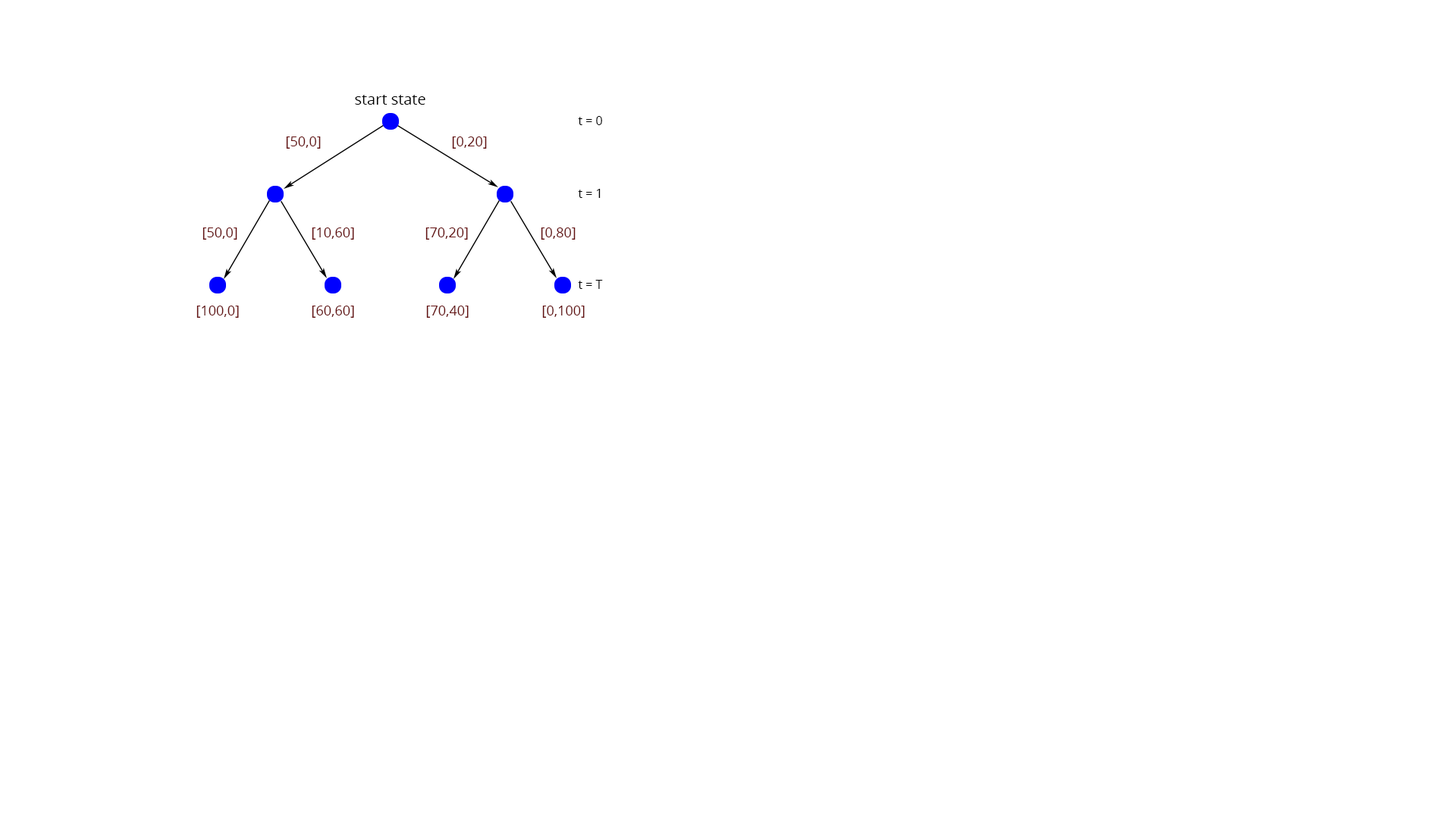
<style>
.page{position:relative;width:1456px;height:819px;background:#ffffff}
.page>*{position:absolute;margin:0}
.t1{font:15.2px "OpenSans";color:#000000}
.t2{font:12.1px "OpenSans";color:#000000}
.t3{font:13.6px "OpenSans";color:#641010}
</style>
<div class="page">
<p class="t1" style="left:355px;top:95px;width:70px;height:10px">start state</p>
<p class="t2" style="left:578px;top:116px;width:24px;height:9px">t = 0</p>
<p class="t3" style="left:286px;top:136px;width:35px;height:13px">[50,0]</p>
<p class="t3" style="left:452px;top:136px;width:35px;height:13px">[0,20]</p>
<p class="t2" style="left:578px;top:189px;width:23px;height:9px">t = 1</p>
<p class="t3" style="left:202px;top:227px;width:35px;height:13px">[50,0]</p>
<p class="t3" style="left:312px;top:227px;width:42px;height:13px">[10,60]</p>
<p class="t3" style="left:425px;top:227px;width:43px;height:13px">[70,20]</p>
<p class="t3" style="left:541px;top:227px;width:35px;height:13px">[0,80]</p>
<p class="t2" style="left:578px;top:280px;width:25px;height:9px">t = T</p>
<p class="t3" style="left:196px;top:306px;width:43px;height:12px">[100,0]</p>
<p class="t3" style="left:312px;top:306px;width:42px;height:12px">[60,60]</p>
<p class="t3" style="left:426px;top:306px;width:43px;height:12px">[70,40]</p>
<p class="t3" style="left:542px;top:306px;width:43px;height:12px">[0,100]</p>
</div>
